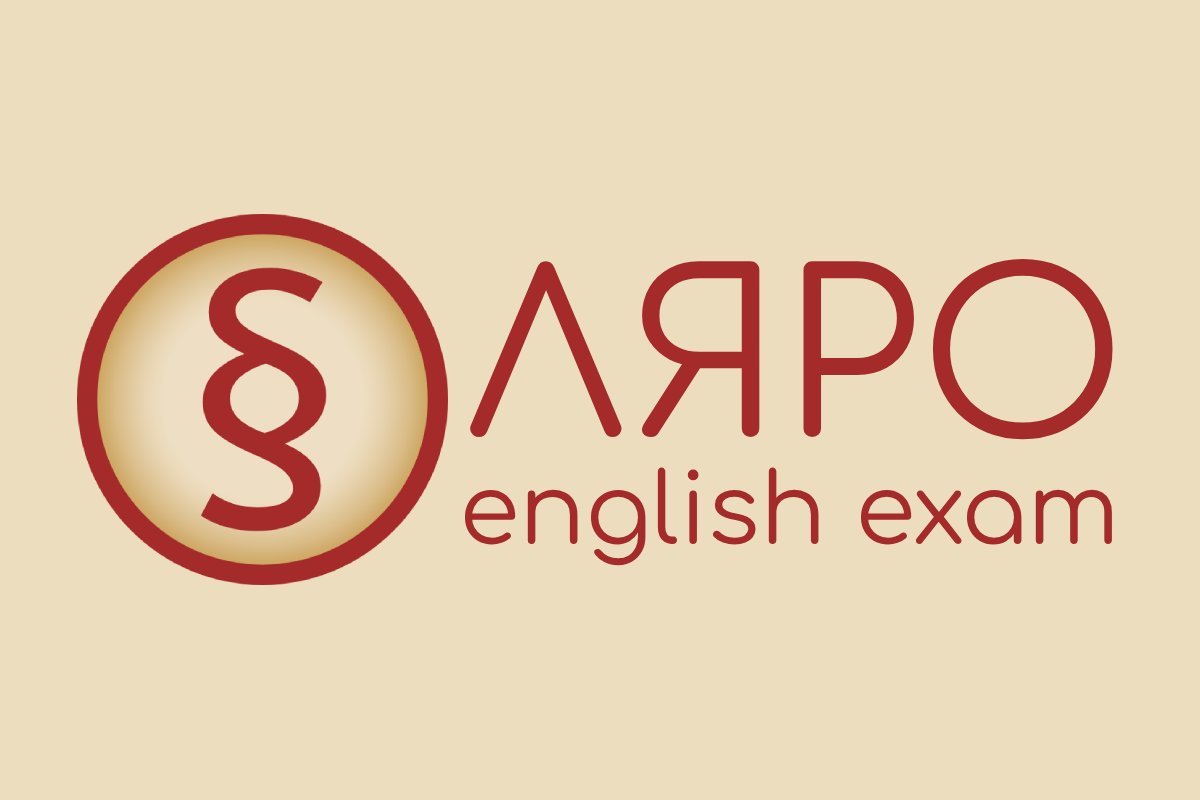
<style>
.page{position:relative;width:1200px;height:800px;background:#ecddbf}
.page>*{position:absolute;margin:0}
.t1{font:225px "Comfortaa-Regular";color:#a52a2a}
.t2{font:97.9px "Comfortaa-Regular";color:#a52a2a}
</style>
<div class="page">
<p class="t1" style="left:469px;top:259px;width:644px;height:181px">ЛЯРО</p>
<p class="t2" style="left:465px;top:467px;width:647px;height:99px">english exam</p>
</div>
